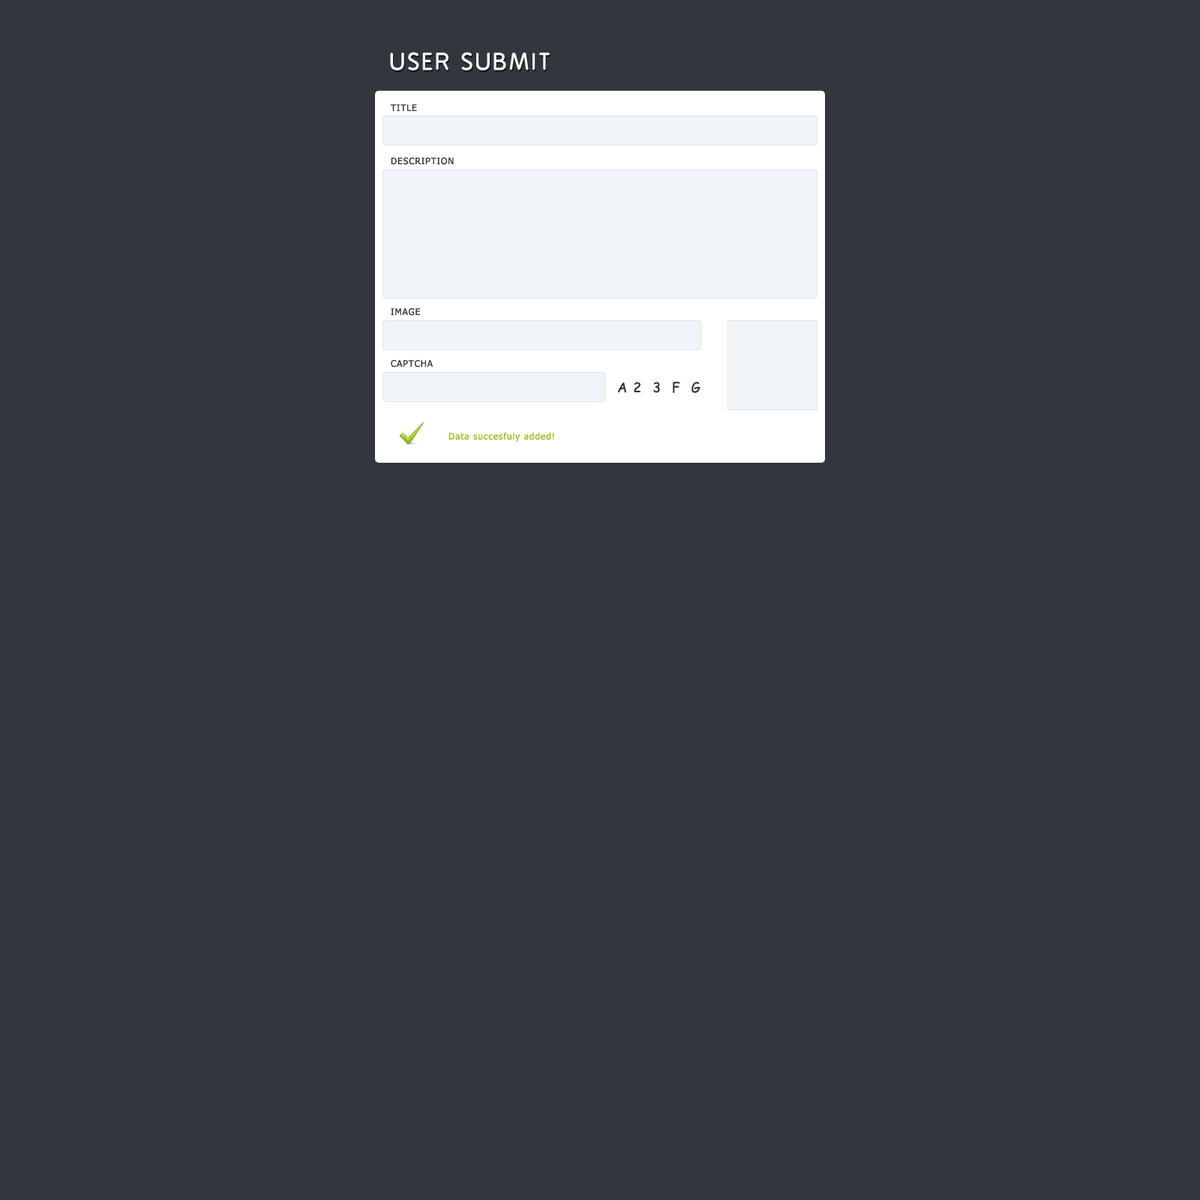
<style>
.page{position:relative;width:1200px;height:1200px;background:#31373d}
.page>*{position:absolute;margin:0}
.t1{font:22.5px "BPreplay";letter-spacing:0.075em;color:#ffffff;font-weight:bold}
.t2{font:9px "Tahoma";letter-spacing:0.075em;color:#333333;text-transform:uppercase}
.t3{font:13.5px "ComicSansMS";letter-spacing:0.075em;color:#333333;text-transform:uppercase}
.t4{font:9px "Tahoma";letter-spacing:0.075em;color:#90c011}
</style>
<div class="page">
<p class="t1" style="left:390px;top:52px;width:160px;height:18px">USER SUBMIT</p>
<p class="t2" style="left:390px;top:104px;width:27px;height:7px">Title</p>
<p class="t2" style="left:391px;top:158px;width:63px;height:7px">Description</p>
<p class="t2" style="left:391px;top:308px;width:29px;height:8px">Image</p>
<p class="t2" style="left:391px;top:360px;width:42px;height:8px">Captcha</p>
<p class="t3" style="left:618px;top:382px;width:82px;height:11px">A 2  3  F  G</p>
<p class="t4" style="left:448px;top:432px;width:106px;height:10px">Data succesfuly added!</p>
</div>
